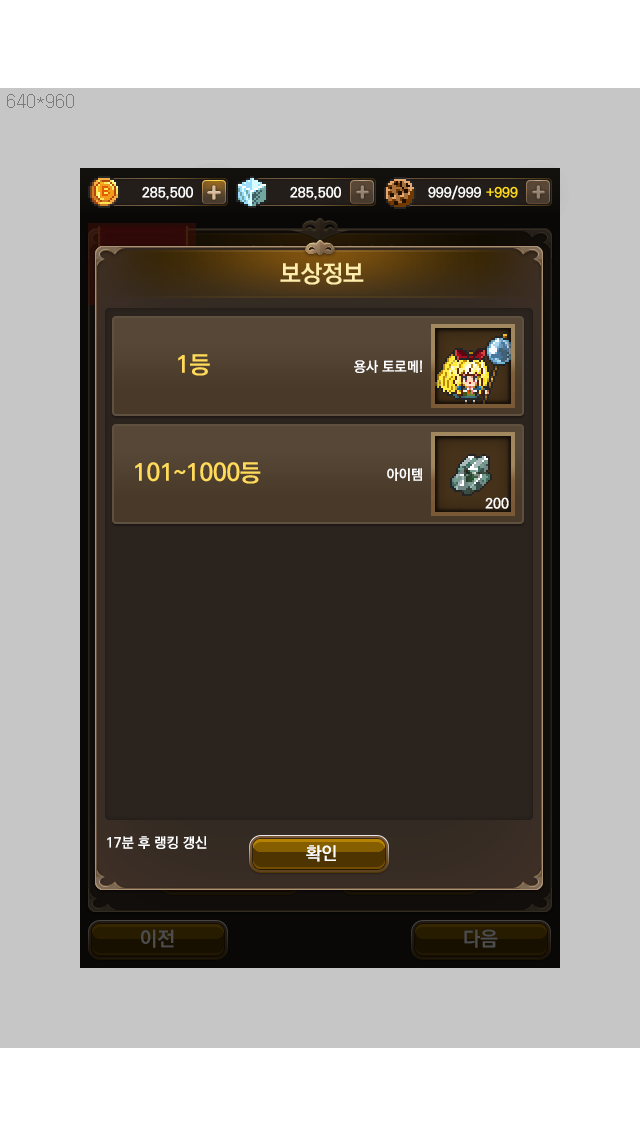
<style>
.page{position:relative;width:640px;height:1136px;background:#c6c6c6}
.page>*{position:absolute;margin:0}
.t1{font:24px "KoPubDotumBold";color:#ffedab}
.t2{font:24px "KoPubDotumBold";color:#ffda5b}
.t3{font:14px "KoPubDotumBold";color:#ffffff}
.t4{font:18px "KoPubDotumBold";color:#ffffff}
</style>
<div class="page">
<p class="t1" style="left:280px;top:262px;width:84px;height:23px">보상정보</p>
<p class="t2" style="left:178px;top:354px;width:32px;height:22px">1등</p>
<p class="t3" style="left:354px;top:360px;width:68px;height:13px">용사 토로메!</p>
<p class="t2" style="left:135px;top:462px;width:126px;height:22px">101~1000등</p>
<p class="t3" style="left:387px;top:468px;width:35px;height:13px">아이템</p>
<p class="t3" style="left:485px;top:497px;width:24px;height:12px">200</p>
<p class="t3" style="left:107px;top:836px;width:100px;height:13px">17분 후 랭킹 갱신</p>
<p class="t4" style="left:306px;top:845px;width:30px;height:17px">확인</p>
</div>
